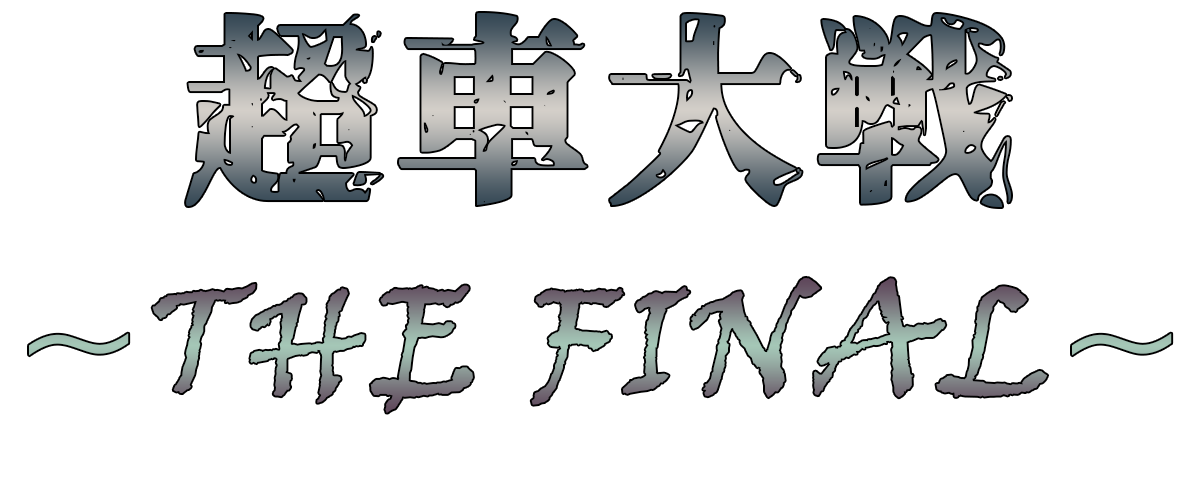
<style>
.page{position:relative;width:1200px;height:500px;background:#ffffff}
.page>*{position:absolute;margin:0}
.t1{font:200px "Genkaimincho";letter-spacing:0.05em;font-variant:small-caps}
.t2{font:150px "VinerHandITC";letter-spacing:0.05em;font-variant:small-caps}
</style>
<div class="page">
<p class="t1" style="left:186px;top:13px;width:825px;height:194px">超車大戦</p>
<p class="t2" style="left:29px;top:277px;width:1143px;height:136px">~THE FINAL~</p>
</div>
